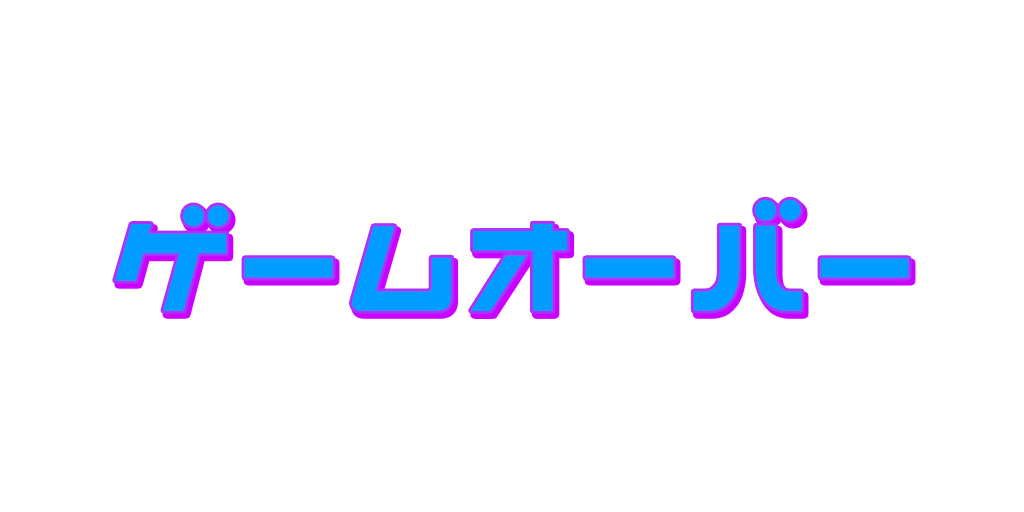
<style>
.page{position:relative;width:1024px;height:512px;background:#ffffff}
.page>*{position:absolute;margin:0}
.t1{font:146.7px "Nicoca";color:#009cff}
</style>
<div class="page">
<p class="t1" style="left:115px;top:199px;width:794px;height:112px">ゲームオーバー</p>
</div>
